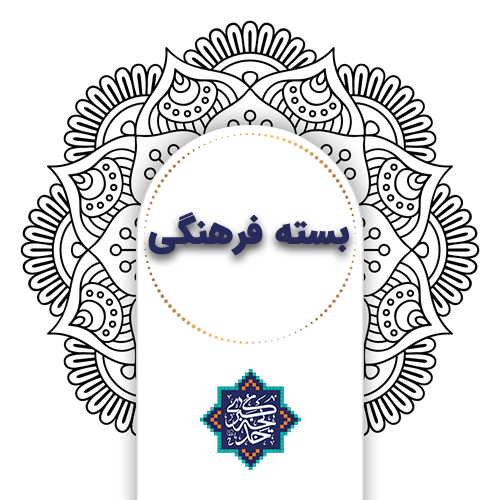
<style>
.page{position:relative;width:500px;height:500px;background:#ffffff}
.page>*{position:absolute;margin:0}
.t1{font:36px "IRANSans-Black";color:#262b5b;font-weight:bold}
</style>
<div class="page">
<p class="t1" style="left:148px;top:212px;width:201px;height:44px">بسته فرهنگی</p>
</div>
